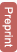
<style>
.page{position:relative;width:17px;height:52px;background:#c0625d}
.page>*{position:absolute;margin:0}
.t1{font:11px "ArialMT";letter-spacing:0.025em;color:#ffffff}
</style>
<div class="page">
<p class="t1" style="left:2px;top:7px;width:11px;height:41px;rotate:90deg">Preprint</p>
</div>
